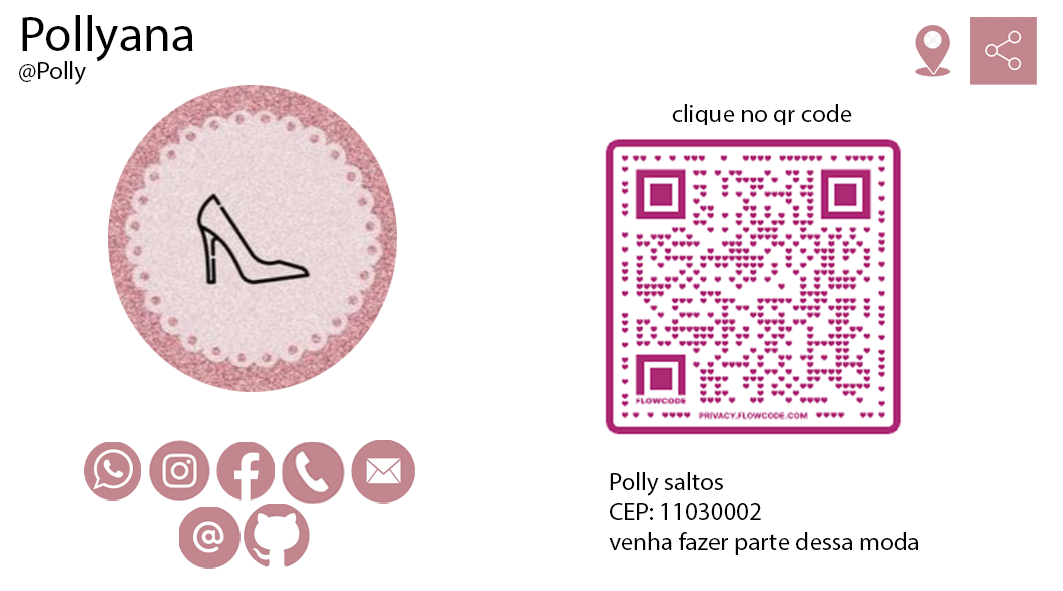
<style>
.page{position:relative;width:1063px;height:591px;background:#ffffff}
.page>*{position:absolute;margin:0}
.t1{font:50px "MyriadPro-Regular";color:#000000}
.t2{font:25px "MyriadPro-Regular";color:#000000}
</style>
<div class="page">
<p class="t1" style="left:22px;top:15px;width:171px;height:47px">Pollyana</p>
<p class="t2" style="left:19px;top:61px;width:67px;height:24px">@Polly</p>
<p class="t2" style="left:672px;top:104px;width:180px;height:23px">clique no qr code</p>
<p class="t2" style="left:609px;top:472px;width:310px;height:83px">Polly saltos<br>CEP: 11030002<br>venha fazer parte dessa moda</p>
</div>
